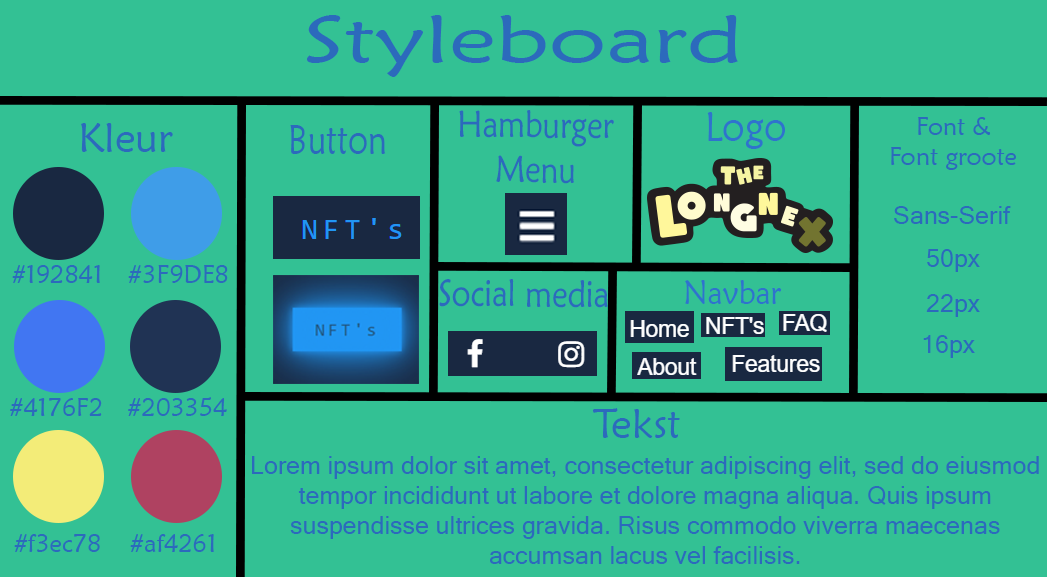
<style>
.page{position:relative;width:1047px;height:577px;background:#33c194}
.page>*{position:absolute;margin:0}
.t1{font:66.7px "MaiandraGD-Regular";color:#2c6abc;scale:1.43 1}
.t2{font:37.5px "MaiandraGD-Regular";color:#2c6abc;scale:0.84 1}
.t3{font:41.7px "MaiandraGD-Regular";color:#2f73cd;scale:0.9 1}
.t4{font:41.7px "MaiandraGD-Regular";color:#2c6abc}
.t5{font:41.7px "MaiandraGD-Regular";color:#2c6abc;scale:0.8 1}
.t6{font:25px "MaiandraGD-Regular";color:#2c6abc}
.t7{font:25px "MicrosoftSansSerif";color:#2c6abc}
.t8{font:33.3px "MaiandraGD-Regular";color:#2f73cd;scale:0.9 1}
</style>
<div class="page">
<p class="t1" style="left:307px;top:15px;width:431px;height:62px">Styleboard</p>
<p class="t2" style="left:459px;top:110px;width:155px;height:74px;text-align:center">Hamburger<br>Menu</p>
<p class="t3" style="left:707px;top:112px;width:78px;height:37px">Logo</p>
<p class="t4" style="left:81px;top:123px;width:92px;height:29px">Kleur</p>
<p class="t5" style="left:290px;top:125px;width:96px;height:29px">Button</p>
<p class="t6" style="left:891px;top:117px;width:125px;height:53px;text-align:center">Font &amp; <br>Font groote</p>
<p class="t7" style="left:894px;top:206px;width:117px;height:18px">Sans-Serif</p>
<p class="t7" style="left:927px;top:249px;width:53px;height:23px">50px</p>
<p class="t6" style="left:12px;top:265px;width:88px;height:18px">#192841</p>
<p class="t6" style="left:128px;top:265px;width:100px;height:18px">#3F9DE8</p>
<p class="t2" style="left:439px;top:279px;width:169px;height:29px">Social media</p>
<p class="t8" style="left:685px;top:280px;width:97px;height:24px">Navbar</p>
<p class="t7" style="left:926px;top:294px;width:54px;height:23px">22px</p>
<p class="t7" style="left:923px;top:335px;width:52px;height:23px">16px</p>
<p class="t6" style="left:10px;top:398px;width:92px;height:18px">#4176F2</p>
<p class="t6" style="left:128px;top:397px;width:99px;height:19px">#203354</p>
<p class="t4" style="left:592px;top:408px;width:88px;height:30px">Tekst</p>
<p class="t7" style="left:252px;top:456px;width:787px;height:108px;text-align:center">Lorem ipsum dolor sit amet, consectetur adipiscing elit, sed do eiusmod tempor incididunt ut labore et dolore magna aliqua. Quis ipsum suspendisse ultrices gravida. Risus commodo viverra maecenas accumsan lacus vel facilisis.</p>
<p class="t6" style="left:14px;top:534px;width:86px;height:18px">#f3ec78</p>
<p class="t6" style="left:130px;top:534px;width:84px;height:18px">#af4261</p>
</div>
